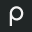
<style>
.page{position:relative;width:32px;height:32px;background:#212626}
.page>*{position:absolute;margin:0}
.t1{font:26px "Chalet-LondonNineteenSeventy";color:#f3f2f2}
</style>
<div class="page">
<p class="t1" style="left:9px;top:6px;width:15px;height:20px">p</p>
</div>
